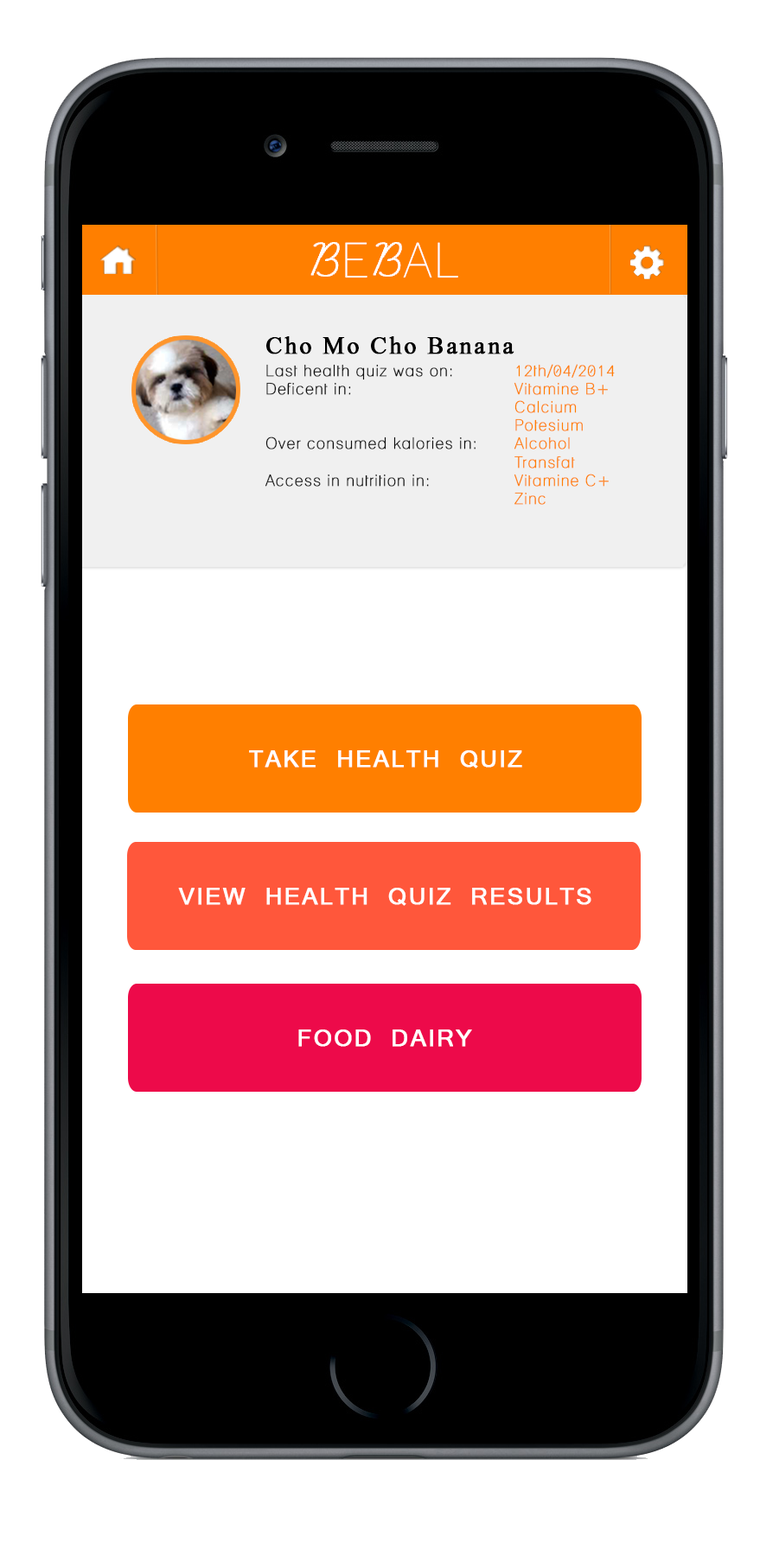
<style>
.page{position:relative;width:760px;height:1568px;background:#ffffff}
.page>*{position:absolute;margin:0}
.t1{font:48.3px "Lane-Narrow";letter-spacing:0.06em;color:#ffffff}
.t2{font:58px "LearningCurveDashedPro";letter-spacing:0.06em;color:#ffffff;font-weight:bold}
.t3{font:15.6px/10.4px "Lane-Narrow";letter-spacing:0.06em;color:#ff7f00;font-weight:bold}
.t4{font:31.1px/7.8px "Kokila";letter-spacing:0.06em;color:#000000;font-weight:bold}
.t5{font:15.6px/10.4px "Lane-Narrow";letter-spacing:0.06em;color:#0f0f0f;font-weight:bold}
.t6{font:25.9px "Vrinda";letter-spacing:0.06em;color:#ffffff;font-weight:bold}
</style>
<div class="page">
<p class="t1" style="left:310px;top:242px;width:148px;height:36px"><span class="t2">B</span>E<span class="t2">B</span>AL</p>
<p class="t3" style="left:265px;top:336px;width:350px;height:169px;text-align:justify"><span class="t4">Cho Mo Cho Banana<br><br><br></span><span class="t5">Last health quiz was on:   </span>12th/04/2014<br> <br><span class="t5">Deficent in:       </span>Vitamine B+<br>        <br>        Calcium<br>  <br>        Potesium<br><span class="t5"><br>Over consumed kalories in:  </span>Alcohol<br>  <br>        Transfat<br><span class="t5"><br>Access in nutrition in:    </span>Vitamine C+<br><br>        Zinc</p>
<p class="t6" style="left:249px;top:750px;width:273px;height:18px">TAKE HEALTH QUIZ</p>
<p class="t6" style="left:178px;top:888px;width:413px;height:18px">VIEW HEALTH QUIZ RESULTS</p>
<p class="t6" style="left:298px;top:1029px;width:174px;height:18px">FOOD DAIRY</p>
</div>
